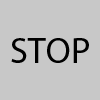
<style>
.page{position:relative;width:100px;height:100px;background:#c8c8c8}
.page>*{position:absolute;margin:0}
.t1{font:36px "MyriadPro-Regular";color:#000000}
</style>
<div class="page">
<p class="t1" style="left:11px;top:38px;width:78px;height:25px">STOP</p>
</div>
